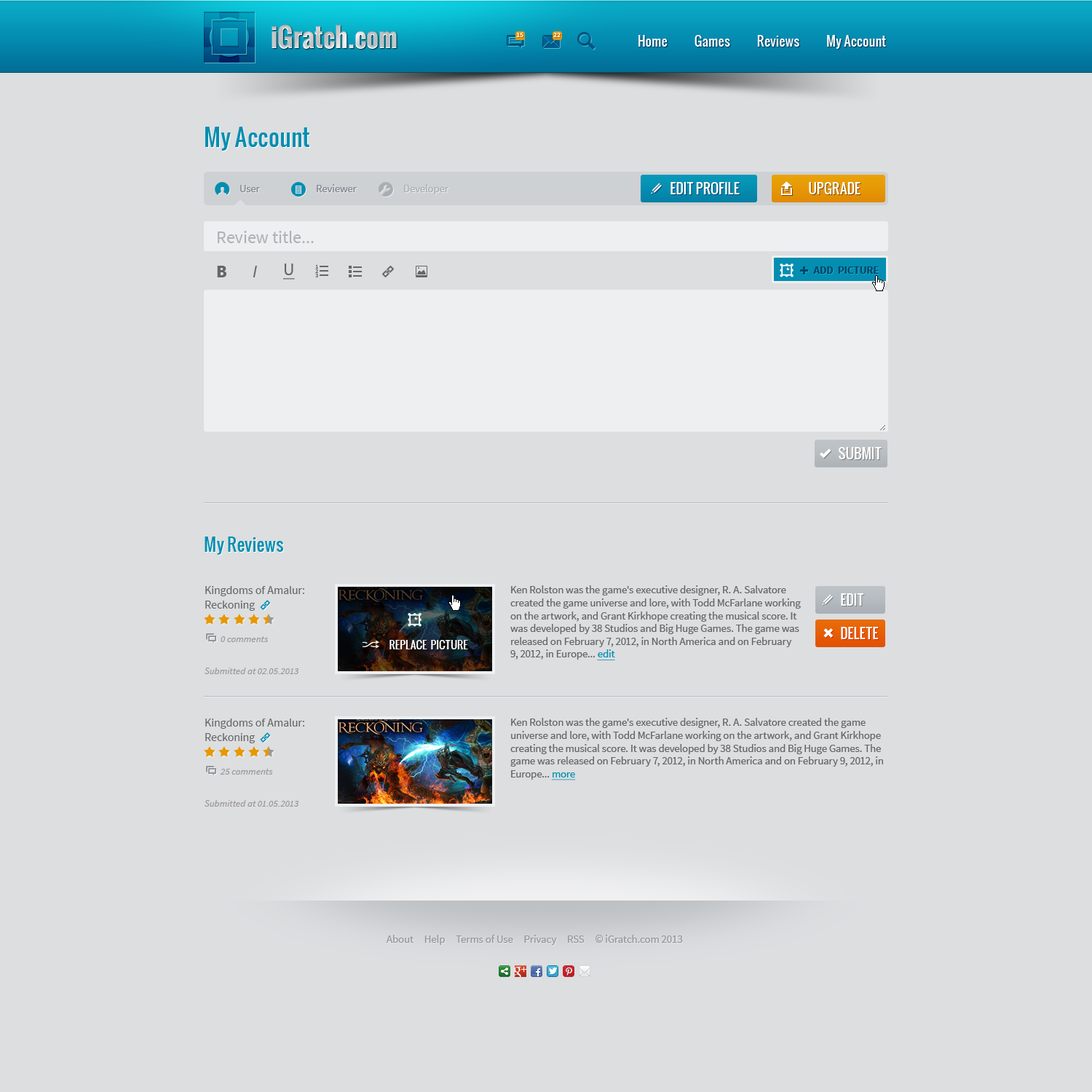
<style>
.page{position:relative;width:1092px;height:1092px;background:#dcdee0}
.page>*{position:absolute;margin:0}
.t1{font:26.2px "Oswald-Bold";color:#c2c6c8}
.t2{font:6.8px "SourceSansPro-Bold";color:#ffffff}
.t3{font:13.1px "Oswald";color:#fffefe}
.t4{font:23.3px "Oswald";color:#048eb1}
.t5{font:10.7px "SourceSansPro-Regular";color:#7f868f}
.t6{font:10.7px "SourceSansPro-Regular";color:#aaafb5}
.t7{font:13.6px "Oswald";color:#ffffff}
.t8{font:17.5px "SourceSansPro-Regular";color:#aeb2b6}
.t9{font:17.5px "SourceSansPro-Black";color:#666666}
.t10{font:17.5px "SourceSansPro-It";color:#666666}
.t11{font:17.5px "SourceSansPro-Regular";color:#666666;text-decoration:underline}
.t12{font:10.7px "SourceSansPro-Bold";color:#004565}
.t13{font:17.5px "Oswald";color:#048eb1}
.t14{font:11.6px "SourceSansPro-Regular";color:#666666}
.t15{font:10.7px "SourceSansPro-Regular";color:#666666}
.t16{font:10.7px "SourceSansPro-Regular";color:#048eb1;text-decoration:underline}
.t17{font:9.7px "SourceSansPro-It";color:#9d9797}
.t18{font:10.7px "Oswald";color:#ffffff}
.t19{font:10.7px "SourceSansPro-Regular";color:#94989d}
</style>
<div class="page">
<p class="t1" style="left:272px;top:25px;width:125px;height:24px">iGratch.com</p>
<p class="t2" style="left:516px;top:33px;width:7px;height:4px">15</p>
<p class="t2" style="left:553px;top:33px;width:8px;height:4px">22</p>
<p class="t3" style="left:638px;top:35px;width:248px;height:14px">Home            Games            Reviews            My Account</p>
<p class="t4" style="left:205px;top:127px;width:104px;height:24px">My Account</p>
<p class="t5" style="left:240px;top:185px;width:20px;height:7px">User</p>
<p class="t5" style="left:317px;top:184px;width:40px;height:8px">Reviewer</p>
<p class="t6" style="left:404px;top:184px;width:45px;height:10px">Developer</p>
<p class="t7" style="left:670px;top:182px;width:70px;height:12px">EDIT PROFILE</p>
<p class="t7" style="left:809px;top:182px;width:51px;height:12px">UPGRADE</p>
<p class="t8" style="left:218px;top:231px;width:96px;height:12px">Review title...</p>
<p class="t9" style="left:217px;top:266px;width:9px;height:11px">B</p>
<p class="t10" style="left:253px;top:266px;width:4px;height:11px">I</p>
<p class="t11" style="left:283px;top:264px;width:12px;height:16px">U</p>
<p class="t12" style="left:813px;top:266px;width:66px;height:8px">ADD  PICTURE</p>
<p class="t7" style="left:839px;top:447px;width:43px;height:12px">SUBMIT</p>
<p class="t13" style="left:205px;top:537px;width:78px;height:18px">My Reviews</p>
<p class="t14" style="left:205px;top:586px;width:99px;height:25px">Kingdoms of Amalur: Reckoning</p>
<p class="t15" style="left:510px;top:585px;width:291px;height:75px">Ken Rolston was the game's executive designer, R. A. Salvatore created the game universe and lore, with Todd McFarlane working on the artwork, and Grant Kirkhope creating the musical score. It was developed by 38 Studios and Big Huge Games. The game was released on February 7, 2012, in North America and on February 9, 2012, in Europe... <span class="t16">edit</span></p>
<p class="t7" style="left:841px;top:593px;width:23px;height:13px">EDIT</p>
<p class="t7" style="left:841px;top:627px;width:37px;height:12px">DELETE</p>
<p class="t17" style="left:221px;top:636px;width:48px;height:6px">0 comments</p>
<p class="t18" style="left:389px;top:640px;width:79px;height:9px">REPLACE  PICTURE</p>
<p class="t17" style="left:205px;top:668px;width:94px;height:6px">Submitted at 02.05.2013</p>
<p class="t14" style="left:205px;top:719px;width:99px;height:24px">Kingdoms of Amalur: Reckoning</p>
<p class="t15" style="left:510px;top:718px;width:373px;height:62px">Ken Rolston was the game's executive designer, R. A. Salvatore created the game universe and lore, with Todd McFarlane working on the artwork, and Grant Kirkhope creating the musical score. It was developed by 38 Studios and Big Huge Games. The game was released on February 7, 2012, in North America and on February 9, 2012, in Europe... <span class="t16">more</span></p>
<p class="t17" style="left:220px;top:769px;width:53px;height:6px">25 comments</p>
<p class="t17" style="left:205px;top:800px;width:94px;height:7px">Submitted at 01.05.2013</p>
<p class="t19" style="left:386px;top:935px;width:297px;height:10px">About     Help     Terms of Use     Privacy     RSS     © iGratch.com 2013</p>
</div>
